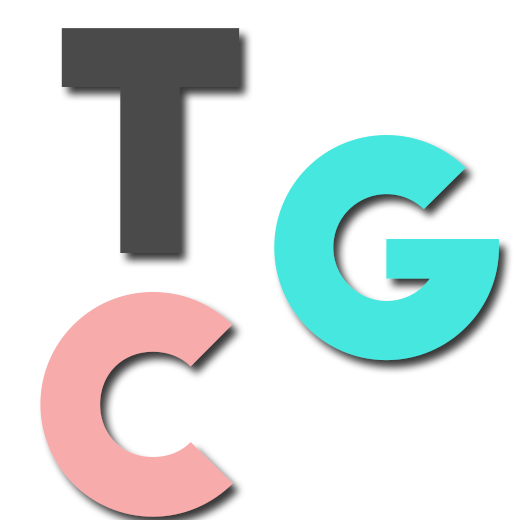
<style>
.page{position:relative;width:514px;height:520px;background:#ffffff}
.page>*{position:absolute;margin:0}
.t1{font:300px "BigJohn";letter-spacing:0.02em;color:#4a4a4a}
.t2{font:300px "BigJohn";letter-spacing:0.02em;color:#46e7df}
.t3{font:300px "BigJohn";letter-spacing:0.02em;color:#f7abab}
</style>
<div class="page">
<p class="t1" style="left:61px;top:28px;width:179px;height:225px">T</p>
<p class="t2" style="left:274px;top:135px;width:225px;height:226px">G</p>
<p class="t3" style="left:40px;top:292px;width:193px;height:225px">C</p>
</div>
